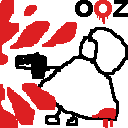
<style>
.page{position:relative;width:128px;height:128px;background:#ffffff}
.page>*{position:absolute;margin:0}
.t1{font:24px "Arial-Black";letter-spacing:-0.05em;color:#000000}
.t2{font:24px "Arial-Black";letter-spacing:-0.05em;color:#e22828}
</style>
<div class="page">
<p class="t1" style="left:75px;top:0px;width:53px;height:17px">O<span class="t2">O</span>Z</p>
</div>
